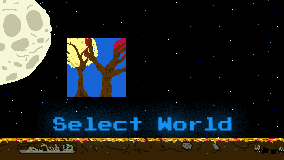
<style>
.page{position:relative;width:284px;height:160px;background:#000000}
.page>*{position:absolute;margin:0}
.t1{font:15px "PressStart2P";color:#1092f6}
</style>
<div class="page">
<p class="t1" style="left:53px;top:117px;width:179px;height:14px">Select World</p>
</div>
